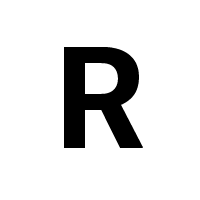
<style>
.page{position:relative;width:200px;height:200px;background:#ffffff}
.page>*{position:absolute;margin:0}
.t1{font:142px "Roboto-Bold";color:#000000}
</style>
<div class="page">
<p class="t1" style="left:64px;top:47px;width:79px;height:101px">R</p>
</div>
